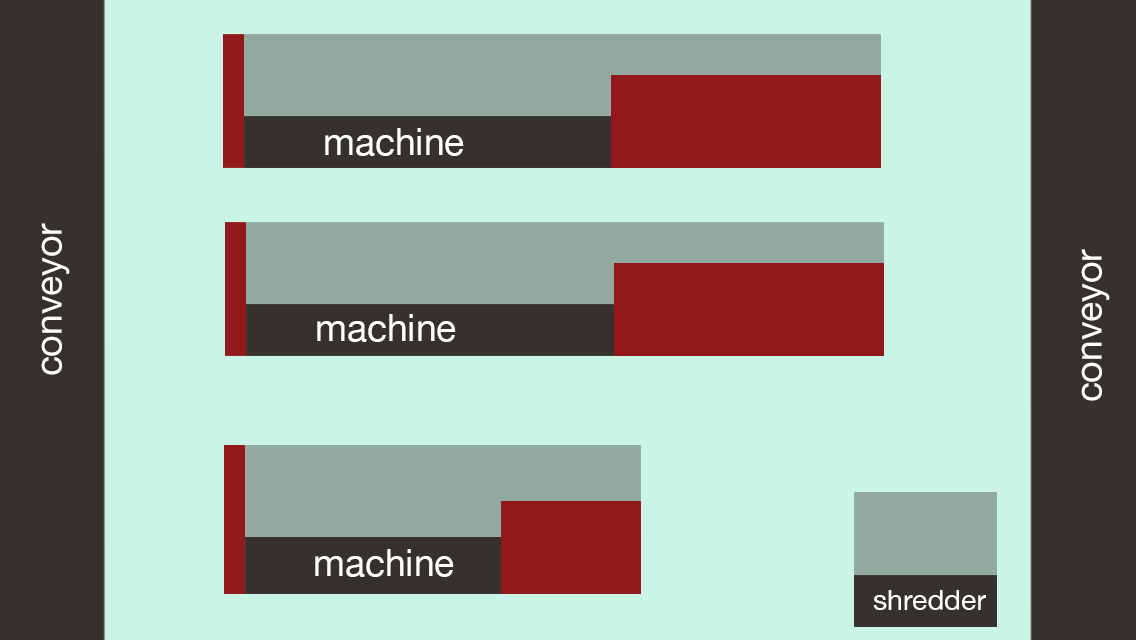
<style>
.page{position:relative;width:1136px;height:640px;background:#caf5e6}
.page>*{position:absolute;margin:0}
.t1{font:37.2px "HelveticaNeue";color:#ffffff}
.t2{font:28.4px "HelveticaNeue";color:#ffffff}
</style>
<div class="page">
<p class="t1" style="left:325px;top:128px;width:139px;height:28px">machine</p>
<p class="t1" style="left:41px;top:223px;width:29px;height:152px;rotate:-90deg">conveyor</p>
<p class="t1" style="left:1081px;top:249px;width:29px;height:152px;rotate:-90deg">conveyor</p>
<p class="t1" style="left:317px;top:314px;width:139px;height:28px">machine</p>
<p class="t1" style="left:315px;top:549px;width:139px;height:28px">machine</p>
<p class="t2" style="left:873px;top:590px;width:113px;height:20px">shredder</p>
</div>
